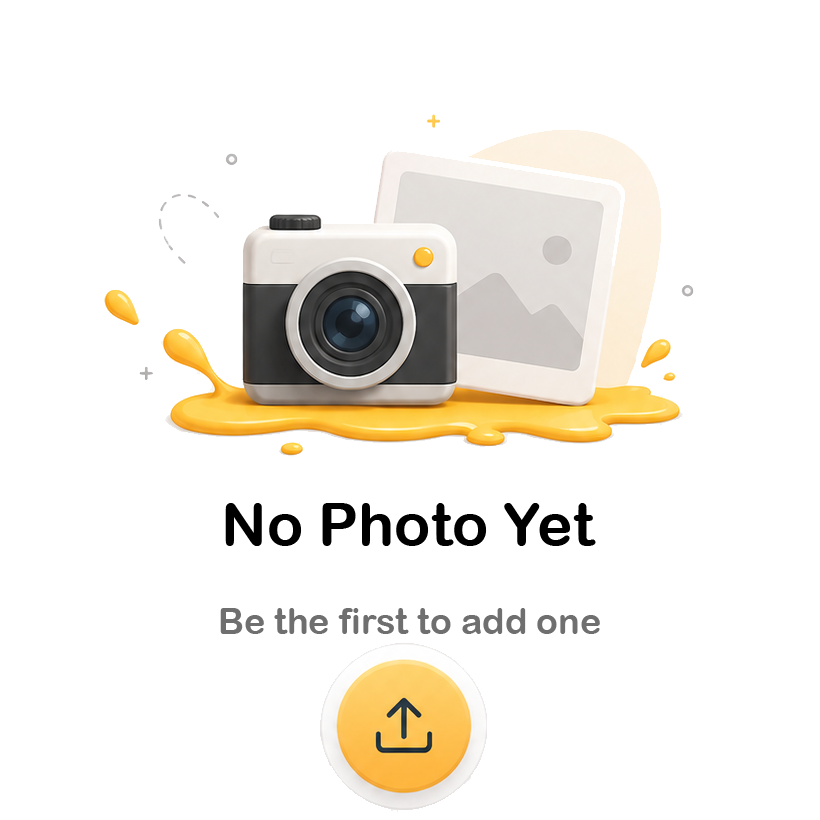
<style>
.page{position:relative;width:820px;height:820px;background:#ffffff}
.page>*{position:absolute;margin:0}
.t1{font:60px "ArialRoundedMTBold";color:#000000}
.t2{font:36px "ArialRoundedMTBold";color:#6f6f6f}
</style>
<div class="page">
<p class="t1" style="left:225px;top:503px;width:371px;height:43px">No Photo Yet</p>
<p class="t2" style="left:220px;top:608px;width:380px;height:26px">Be the first to add one</p>
</div>
